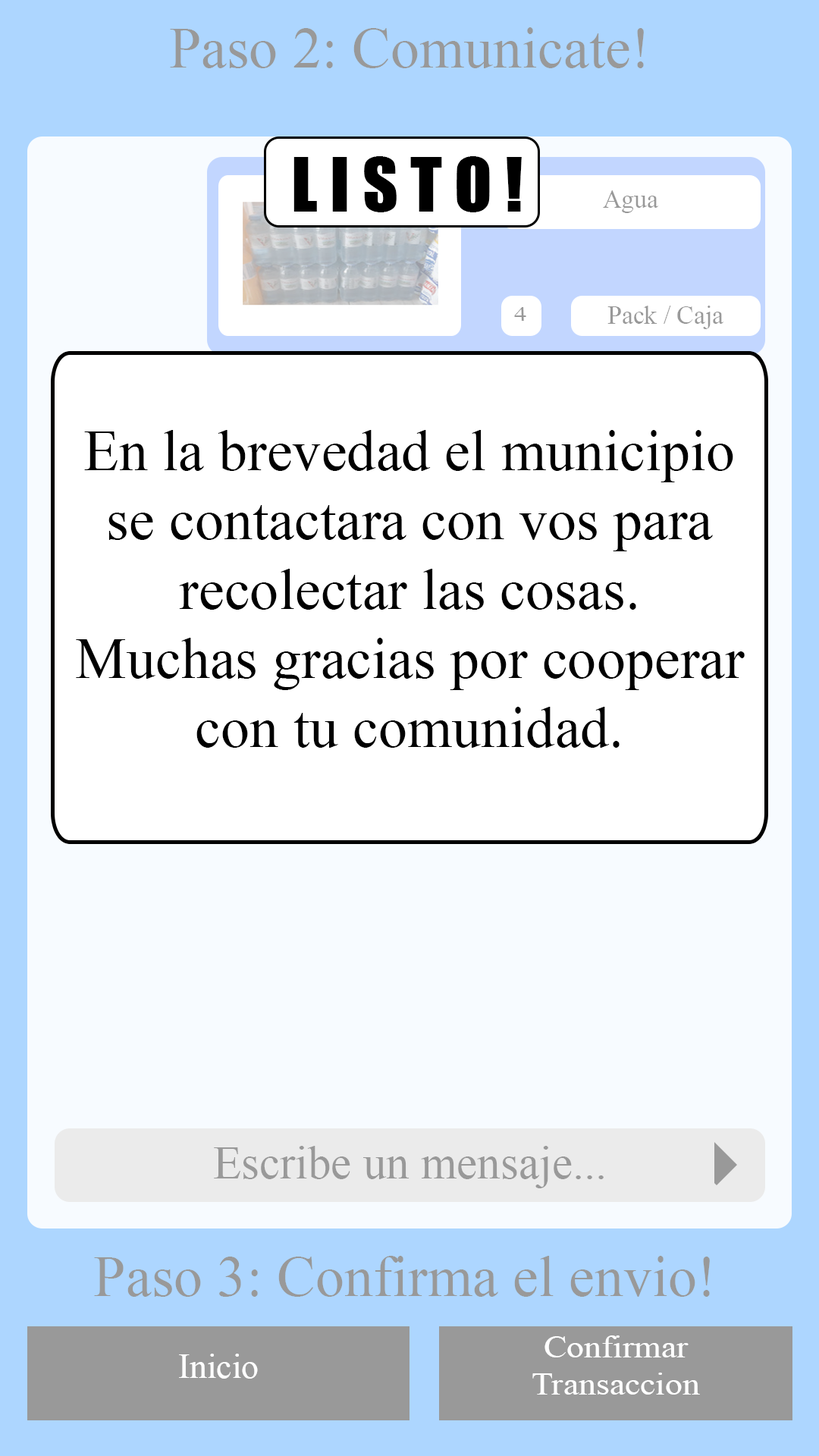
<style>
.page{position:relative;width:819px;height:1456px;background:#ffffff}
.page>*{position:absolute;margin:0}
.t1{font:57.8px "TimesNewRomanPSMT";color:#999999}
.t2{font:69.3px "Impact";color:#000000}
.t3{font:25.5px "TimesNewRomanPSMT";color:#999999}
.t4{font:20.2px "TimesNewRomanPSMT";color:#999999;scale:1.26 1}
.t5{font:57.8px "TimesNewRomanPSMT";color:#000000}
.t6{font:57.8px "Impact";color:#000000}
.t7{font:46.2px "TimesNewRomanPSMT";color:#999999}
.t8{font:31.3px "TimesNewRomanPSMT";color:#ffffff;scale:1.11 1}
.t9{font:34.7px "TimesNewRomanPSMT";color:#ffffff}
</style>
<div class="page">
<p class="t1" style="left:170px;top:27px;width:474px;height:41px">Paso 2: Comunicate!</p>
<p class="t2" style="left:293px;top:156px;width:229px;height:56px">L I S T O !</p>
<p class="t3" style="left:603px;top:190px;width:56px;height:23px">Agua</p>
<p class="t3" style="left:607px;top:306px;width:117px;height:23px">Pack / Caja</p>
<p class="t4" style="left:514px;top:307px;width:12px;height:14px">4</p>
<p class="t5" style="left:76px;top:430px;width:669px;height:318px;text-align:center"><span class="t6"><br></span>En la brevedad el municipio se contactara con vos para recolectar las cosas.<br>Muchas gracias por cooperar con tu comunidad.</p>
<p class="t7" style="left:214px;top:1146px;width:390px;height:42px">Escribe un mensaje...</p>
<p class="t1" style="left:94px;top:1256px;width:616px;height:41px">Paso 3: Confirma el envio!</p>
<p class="t8" style="left:532px;top:1335px;width:168px;height:60px;text-align:center">Confirmar<br>Transaccion</p>
<p class="t9" style="left:179px;top:1354px;width:79px;height:25px">Inicio</p>
</div>
